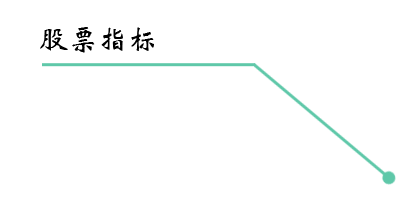
<style>
.page{position:relative;width:412px;height:202px;background:#ffffff}
.page>*{position:absolute;margin:0}
.t1{font:30px "STXinwei";color:#000000}
</style>
<div class="page">
<p class="t1" style="left:40px;top:27px;width:114px;height:26px">股票指标</p>
</div>
